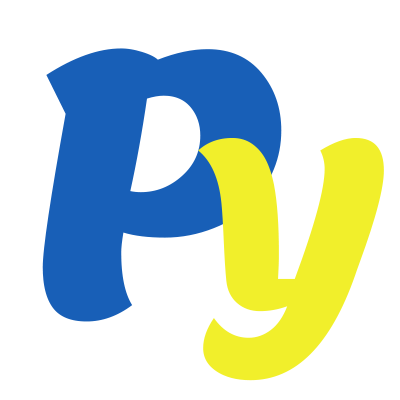
<style>
.page{position:relative;width:400px;height:400px;background:#ffffff}
.page>*{position:absolute;margin:0}
.t1{font:362.9px "Lemon-Regular";letter-spacing:-0.25em;color:#185fb7}
.t2{font:290.3px "Lemon-Regular";letter-spacing:-0.25em;color:#f1ef2b}
</style>
<div class="page">
<p class="t1" style="left:42px;top:48px;width:342px;height:333px">P<span class="t2">y</span></p>
</div>
